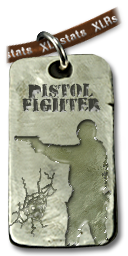
<style>
.page{position:relative;width:128px;height:256px;background:#ffffff}
.page>*{position:absolute;margin:0}
.t1{font:17.3px/14.5px "HVDPeace";color:#383932}
</style>
<div class="page">
<p class="t1" style="left:22px;top:83px;width:79px;height:30px;text-align:center;opacity:0.9">PISTOL<br>FIGHTER</p>
</div>
